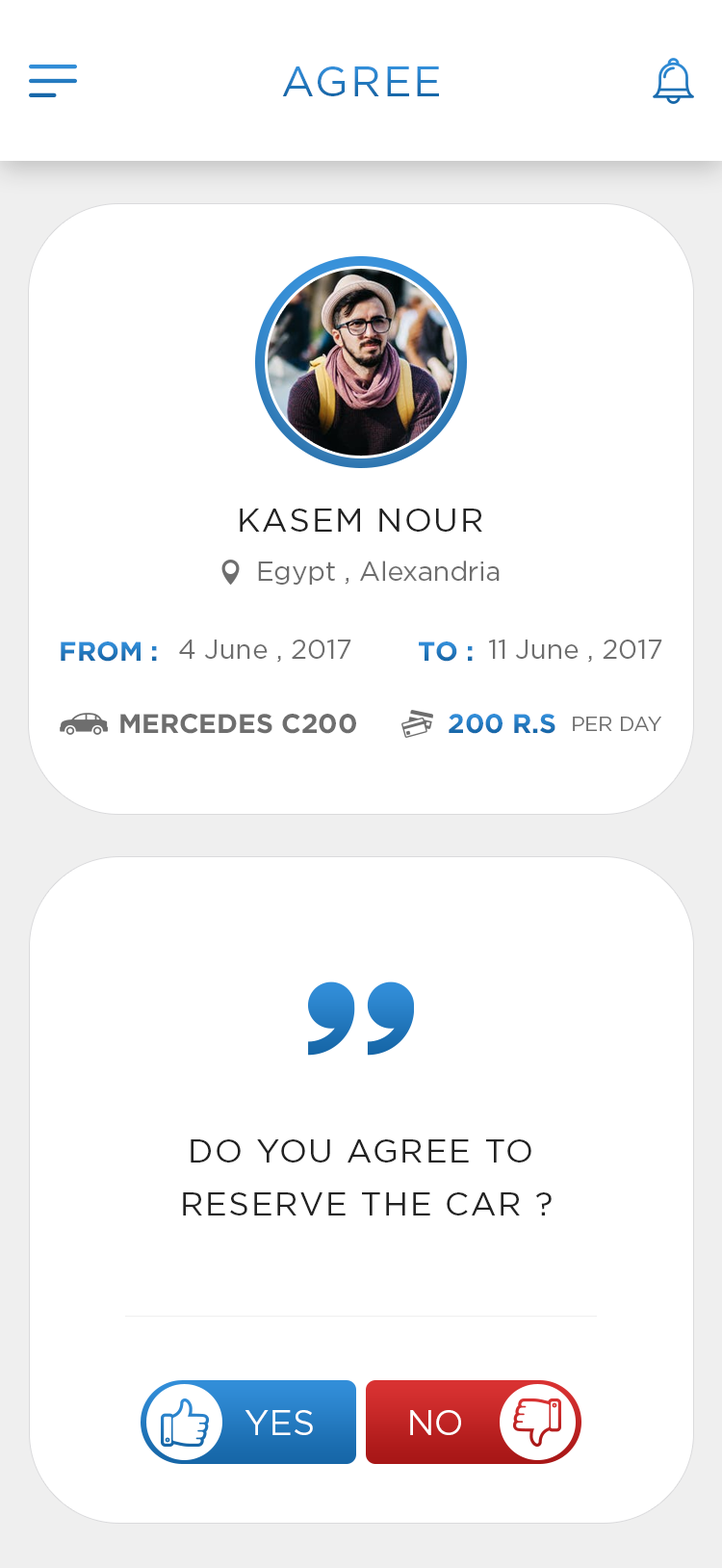
<style>
.page{position:relative;width:722px;height:1568px;background:#ffffff}
.page>*{position:absolute;margin:0}
.t1{font:42.4px "Gotham-Book";letter-spacing:0.05em;text-transform:uppercase}
.t2{font:32.7px "Gotham-Book";letter-spacing:0.05em;color:#222222;text-transform:uppercase}
.t3{font:27px "Gotham-Book";color:#6e6e6e}
.t4{font:27px "Gotham-Bold";color:#267dc3}
.t5{font:27px "Gotham-Bold";color:#287fc6}
.t6{font:27px "Gotham-Bold";color:#6e6e6e}
.t7{font:27px "Gotham-Bold";color:#247ac0}
.t8{font:20.2px "Gotham-Book";color:#6e6e6e}
.t9{font:32.7px/53px "Gotham-Book";letter-spacing:0.05em;color:#222222;text-transform:uppercase}
.t10{font:34.7px "Gotham-Book";color:#ffffff}
</style>
<div class="page">
<p class="t1" style="left:282px;top:66px;width:157px;height:30px">AGREE</p>
<p class="t2" style="left:240px;top:509px;width:243px;height:23px">KASEM NOUR</p>
<p class="t3" style="left:258px;top:561px;width:242px;height:24px">Egypt , Alexandria</p>
<p class="t4" style="left:61px;top:641px;width:96px;height:21px">FROM :</p>
<p class="t3" style="left:179px;top:640px;width:173px;height:23px">4 June , 2017</p>
<p class="t5" style="left:419px;top:641px;width:54px;height:21px">TO :</p>
<p class="t3" style="left:488px;top:640px;width:175px;height:23px">11 June , 2017</p>
<p class="t6" style="left:120px;top:714px;width:236px;height:20px">MERCEDES C200</p>
<p class="t7" style="left:449px;top:714px;width:107px;height:20px">200 R.S</p>
<p class="t8" style="left:573px;top:717px;width:89px;height:14px">PER DAY</p>
<p class="t9" style="left:183px;top:1139px;width:369px;height:76px;text-align:center">Do you agree to<br> reserve the car ?</p>
<p class="t10" style="left:245px;top:1410px;width:68px;height:25px">YES</p>
<p class="t10" style="left:410px;top:1410px;width:51px;height:25px">NO</p>
</div>
